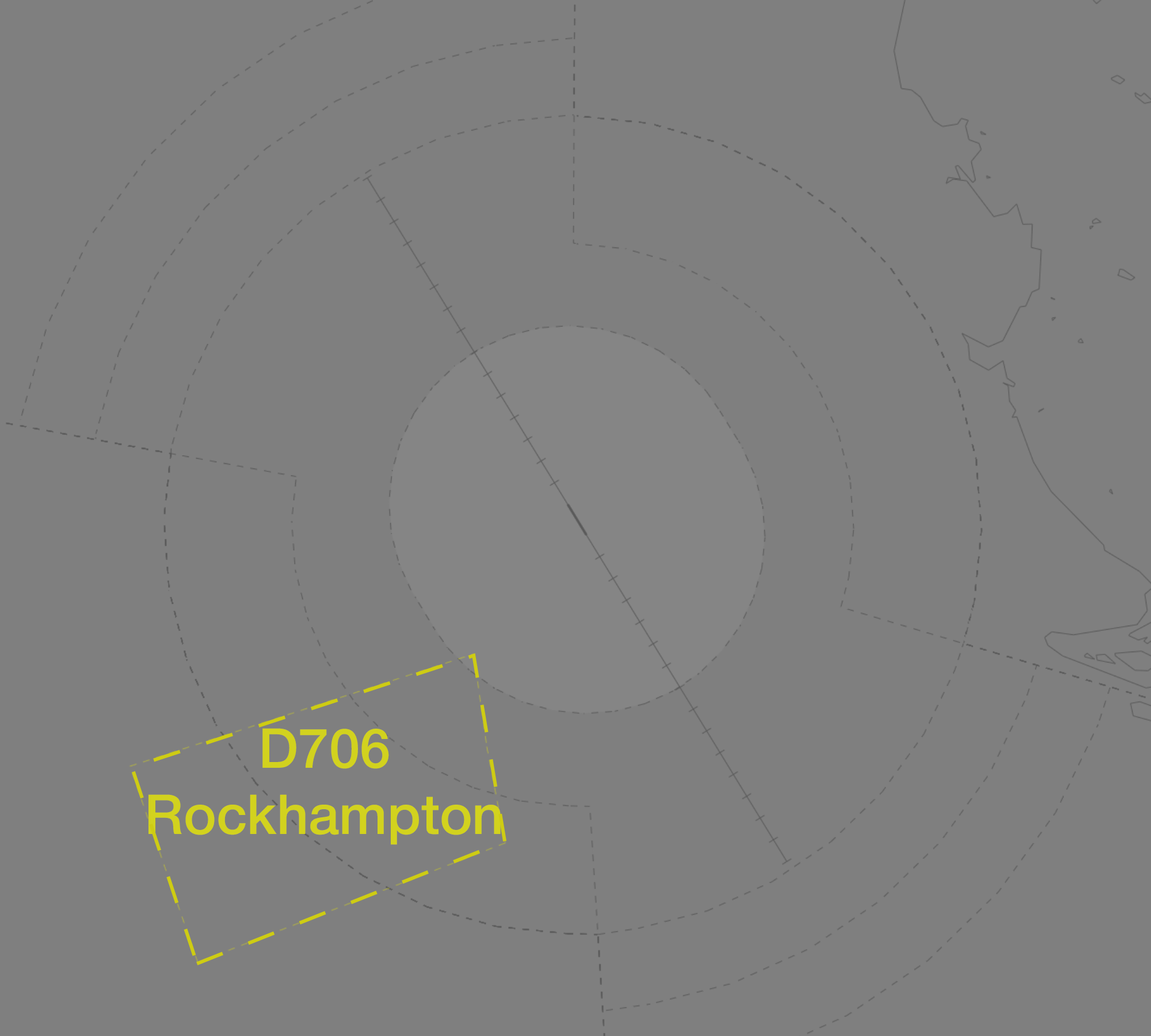
<style>
.page{position:relative;width:1151px;height:1036px;background:#7f7f7f}
.page>*{position:absolute;margin:0}
.t1{font:55.3px "HelveticaNeue-Medium";color:#d2d21e}
</style>
<div class="page">
<p class="t1" style="left:148px;top:728px;width:353px;height:117px;text-align:center">D706<br>Rockhampton</p>
</div>
